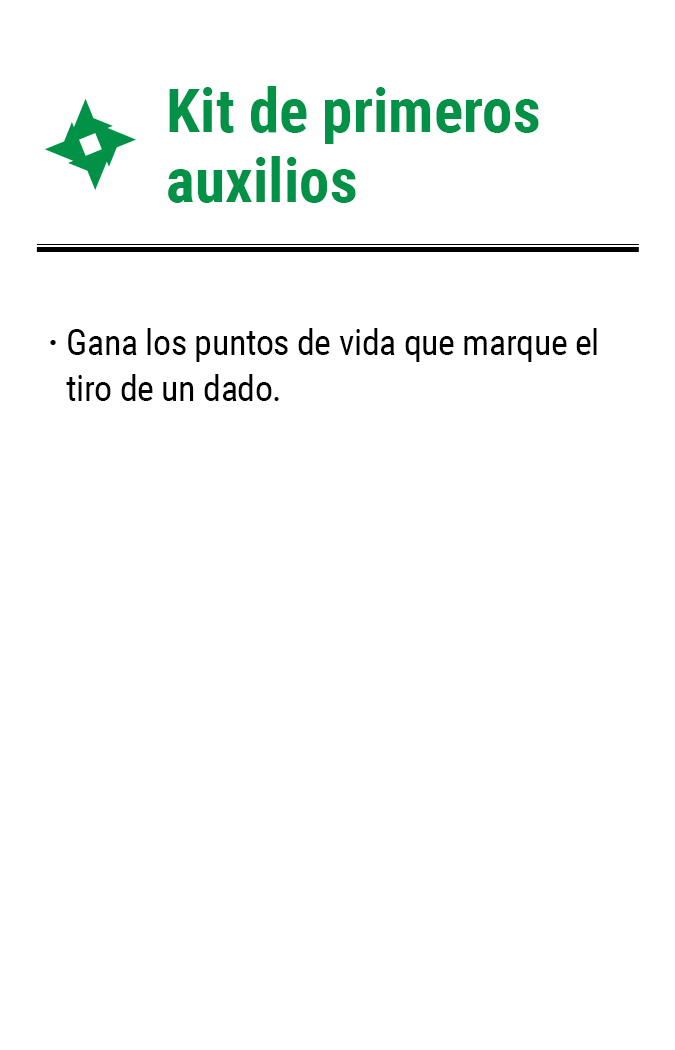
<style>
.page{position:relative;width:675px;height:1050px;background:#ffffff}
.page>*{position:absolute;margin:0}
.t1{font:61.2px/62.9px "RobotoCondensed-Bold";color:#019147}
.t2{font:35.8px/45.8px "RobotoCondensed-Regular";letter-spacing:-0.01em;color:#000000}
.t3{font:35.8px "RobotoCondensed-Bold";letter-spacing:-0.01em;color:#000000}
</style>
<div class="page">
<p class="t1" style="left:168px;top:86px;width:371px;height:117px">Kit de primeros<br>auxilios</p>
<p class="t2" style="left:66px;top:328px;width:531px;height:73px">Gana los puntos de vida que marque el tiro de un dado.</p>
<p class="t3" style="left:50px;top:340px;width:6px;height:5px">·</p>
</div>
